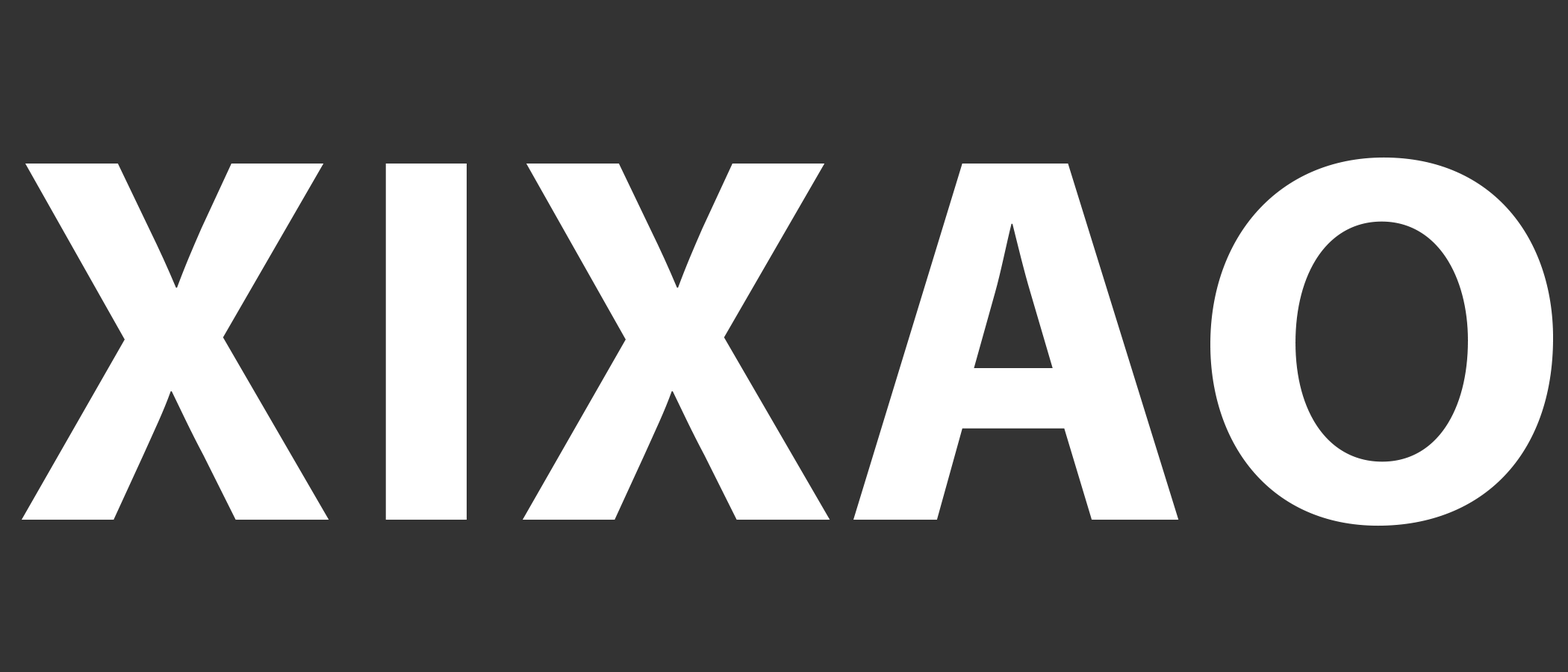
<style>
.page{position:relative;width:1568px;height:672px;background:#333333}
.page>*{position:absolute;margin:0}
.t1{font:528.6px "MyriadPro-Bold";letter-spacing:0.025em;color:#ffffff;text-transform:uppercase}
</style>
<div class="page">
<p class="t1" style="left:22px;top:157px;width:1531px;height:369px">xixao</p>
</div>
